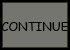
<style>
.page{position:relative;width:70px;height:50px;background:#74756f}
.page>*{position:absolute;margin:0}
.t1{font:12px "ComicSansMS";color:#000000}
</style>
<div class="page">
<p class="t1" style="left:1px;top:22px;width:67px;height:9px">CONTINUE</p>
</div>
